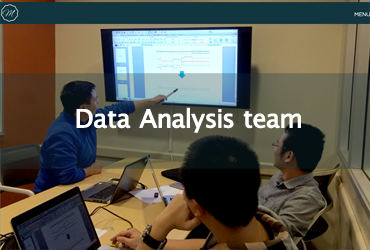
<style>
.page{position:relative;width:370px;height:250px}
.page>*{position:absolute;margin:0}
.t1{font:25px "LucidaSansUnicode";color:#ffffff;font-weight:bold}
</style>
<div class="page">
<p class="t1" style="left:76px;top:107px;width:225px;height:26px">Data Analysis team</p>
</div>
